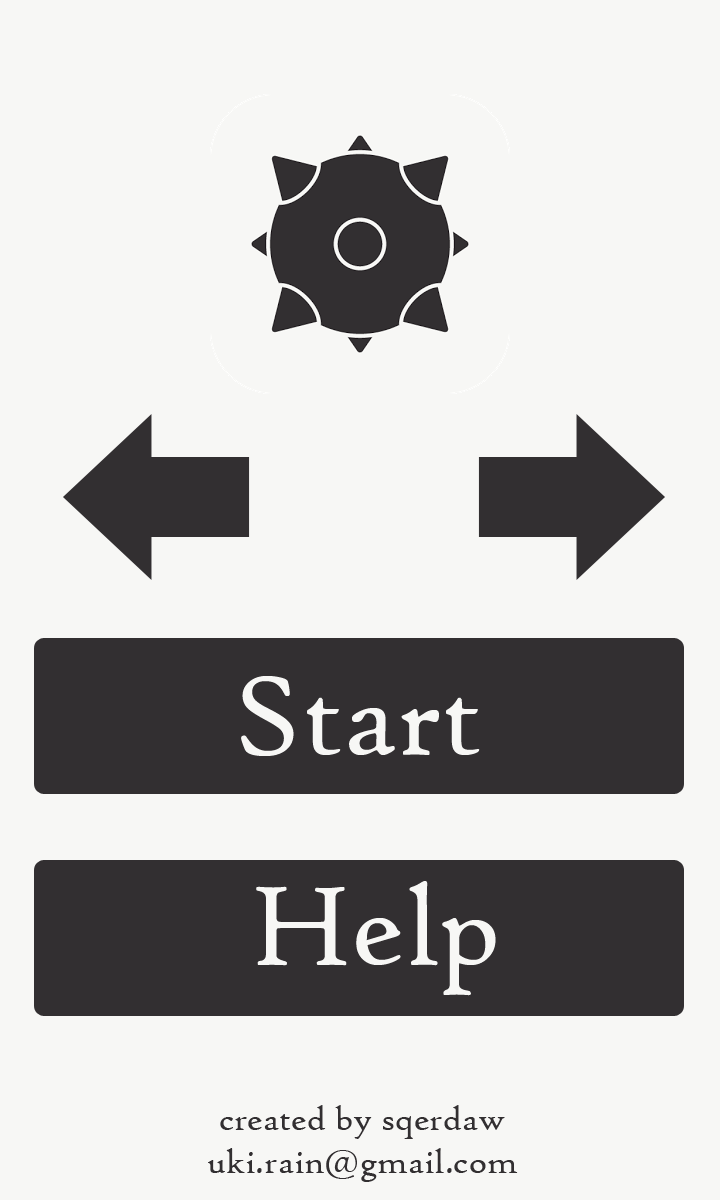
<style>
.page{position:relative;width:720px;height:1200px;background:#f7f7f5}
.page>*{position:absolute;margin:0}
.t1{font:120px "HighTowerText-Reg";color:#f7f7f5}
.t2{font:36px "HighTowerText-Reg";color:#322f31}
</style>
<div class="page">
<p class="t1" style="left:241px;top:676px;width:239px;height:80px">Start</p>
<p class="t1" style="left:256px;top:881px;width:240px;height:115px">Help</p>
<p class="t2" style="left:208px;top:1105px;width:310px;height:77px;text-align:center">created by sqerdaw<br>uki.rain@gmail.com</p>
</div>
